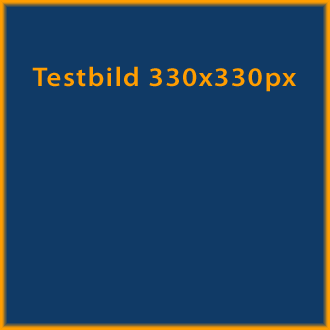
<style>
.page{position:relative;width:330px;height:330px;background:#103a66}
.page>*{position:absolute;margin:0}
.t1{font:27px "MyriadPro-Semibold";letter-spacing:0.05em;color:#ff9d00;scale:1.06 1}
</style>
<div class="page">
<p class="t1" style="left:32px;top:66px;width:264px;height:26px">Testbild 330x330px</p>
</div>
